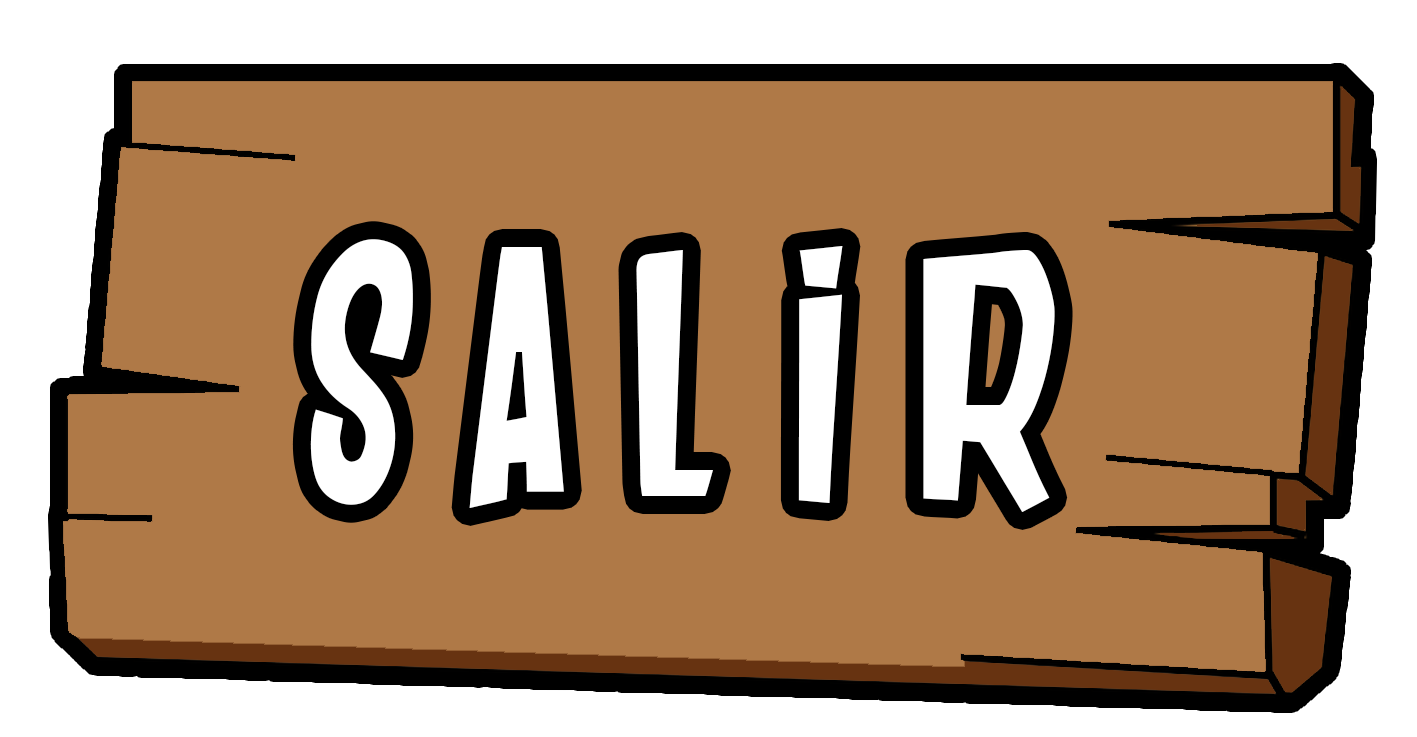
<style>
.page{position:relative;width:1417px;height:737px;background:#af7947}
.page>*{position:absolute;margin:0}
.t1{font:350px "DANCING-JUNGLE";color:#ffffff}
.t2{font:349.6px "DANCING-JUNGLE";color:#ffffff}
</style>
<div class="page">
<p class="t1" style="left:310px;top:239px;width:103px;height:266px">S</p>
<p class="t1" style="left:798px;top:246px;width:45px;height:257px">I</p>
<p class="t2" style="left:469px;top:247px;width:95px;height:261px">A</p>
<p class="t1" style="left:636px;top:250px;width:77px;height:246px">L</p>
<p class="t1" style="left:923px;top:250px;width:132px;height:262px">R</p>
</div>
